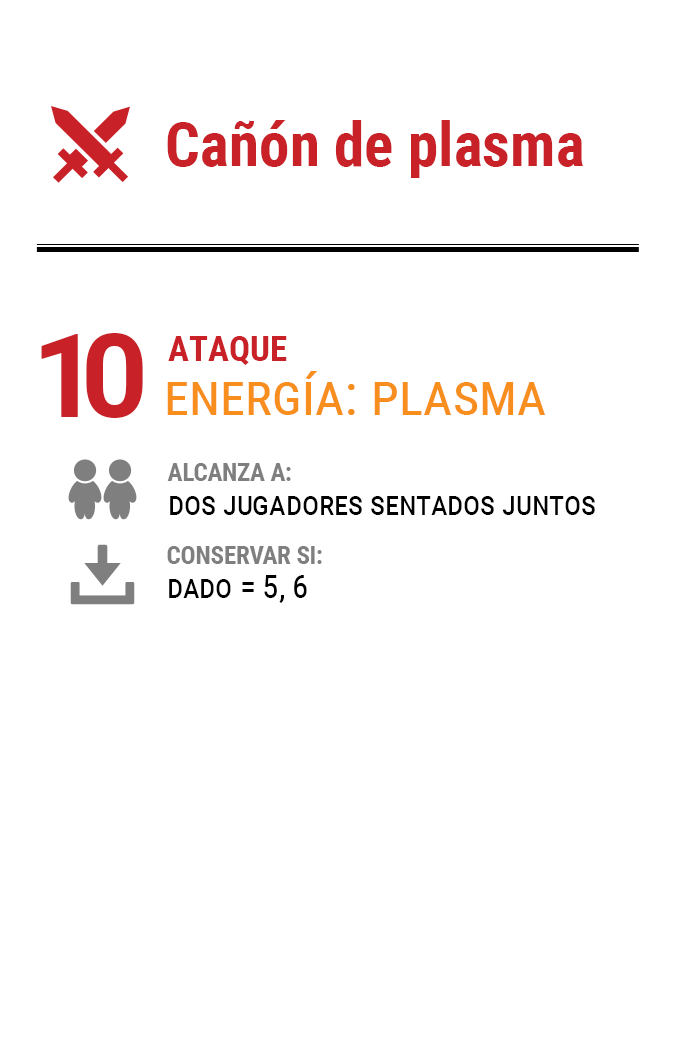
<style>
.page{position:relative;width:675px;height:1050px;background:#ffffff}
.page>*{position:absolute;margin:0}
.t1{font:61.2px "RobotoCondensed-Bold";color:#c82127}
.t2{font:116.7px "Roboto-Bold";letter-spacing:-0.16em;color:#c82127}
.t3{font:35px "RobotoCondensed-Bold";color:#c82127}
.t4{font:58.3px "RobotoCondensed-Regular";color:#f78e1e;font-variant:small-caps}
.t5{font:33.3px/33.3px "RobotoCondensed-Regular";letter-spacing:-0.01em;color:#000000;font-variant:small-caps}
.t6{font:25px/33.3px "RobotoCondensed-Bold";letter-spacing:-0.01em;color:#7f7f7f}
</style>
<div class="page">
<p class="t1" style="left:167px;top:120px;width:416px;height:58px">Cañón de plasma</p>
<p class="t2" style="left:41px;top:333px;width:102px;height:85px">10</p>
<p class="t3" style="left:168px;top:336px;width:119px;height:29px">ATAQUE</p>
<p class="t4" style="left:167px;top:371px;width:379px;height:44px">energía: plasma</p>
<p class="t5" style="left:167px;top:463px;width:428px;height:52px"><span class="t6">ALCANZA A:<br></span>dos jugadores sentados juntos</p>
<p class="t6" style="left:167px;top:546px;width:155px;height:57px">CONSERVAR SI:<br><span class="t5">dado = 5, 6</span></p>
</div>
